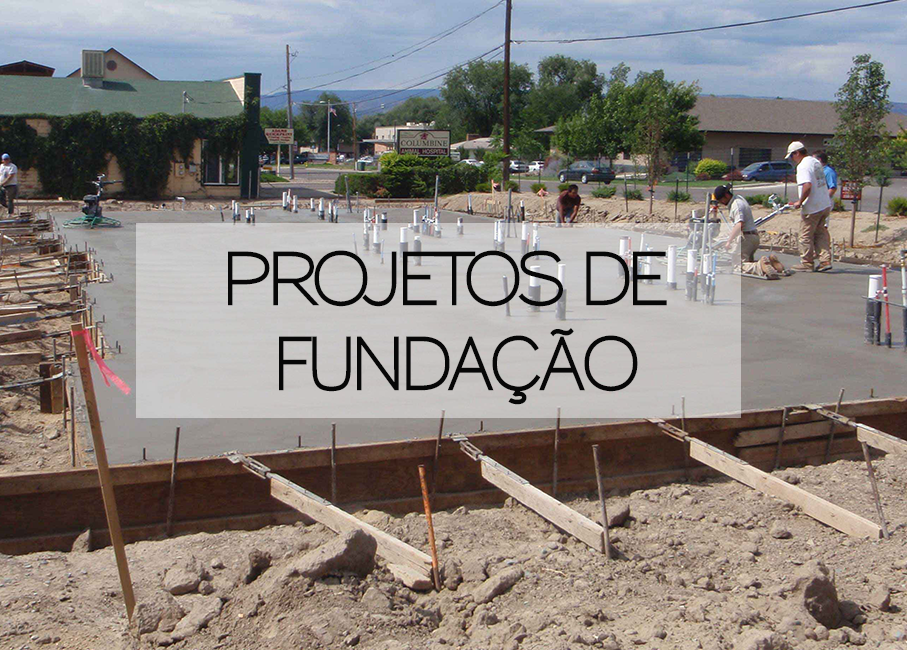
<style>
.page{position:relative;width:907px;height:650px}
.page>*{position:absolute;margin:0}
.t1{font:70.9px "Sansumi-Bold";letter-spacing:-0.05em;color:#070707;scale:0.9 1}
</style>
<div class="page">
<p class="t1" style="left:228px;top:250px;width:439px;height:155px;text-align:center">PROJETOS DE<br>FUNDAÇÃO</p>
</div>
